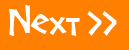
<style>
.page{position:relative;width:129px;height:50px;background:#ff8000}
.page>*{position:absolute;margin:0}
.t1{font:48px "Screwball";color:#ffffff}
</style>
<div class="page">
<p class="t1" style="left:9px;top:5px;width:108px;height:31px">Next &gt;&gt;</p>
</div>
